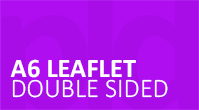
<style>
.page{position:relative;width:199px;height:110px;background:#a80de8}
.page>*{position:absolute;margin:0}
.t1{font:26.6px "Calibri-Bold";color:#ffffff}
.t2{font:26.6px "Calibri-Light";color:#ffffff}
</style>
<div class="page">
<p class="t1" style="left:10px;top:59px;width:126px;height:19px">A6 LEAFLET</p>
<p class="t2" style="left:12px;top:79px;width:156px;height:19px">DOUBLE SIDED</p>
</div>
